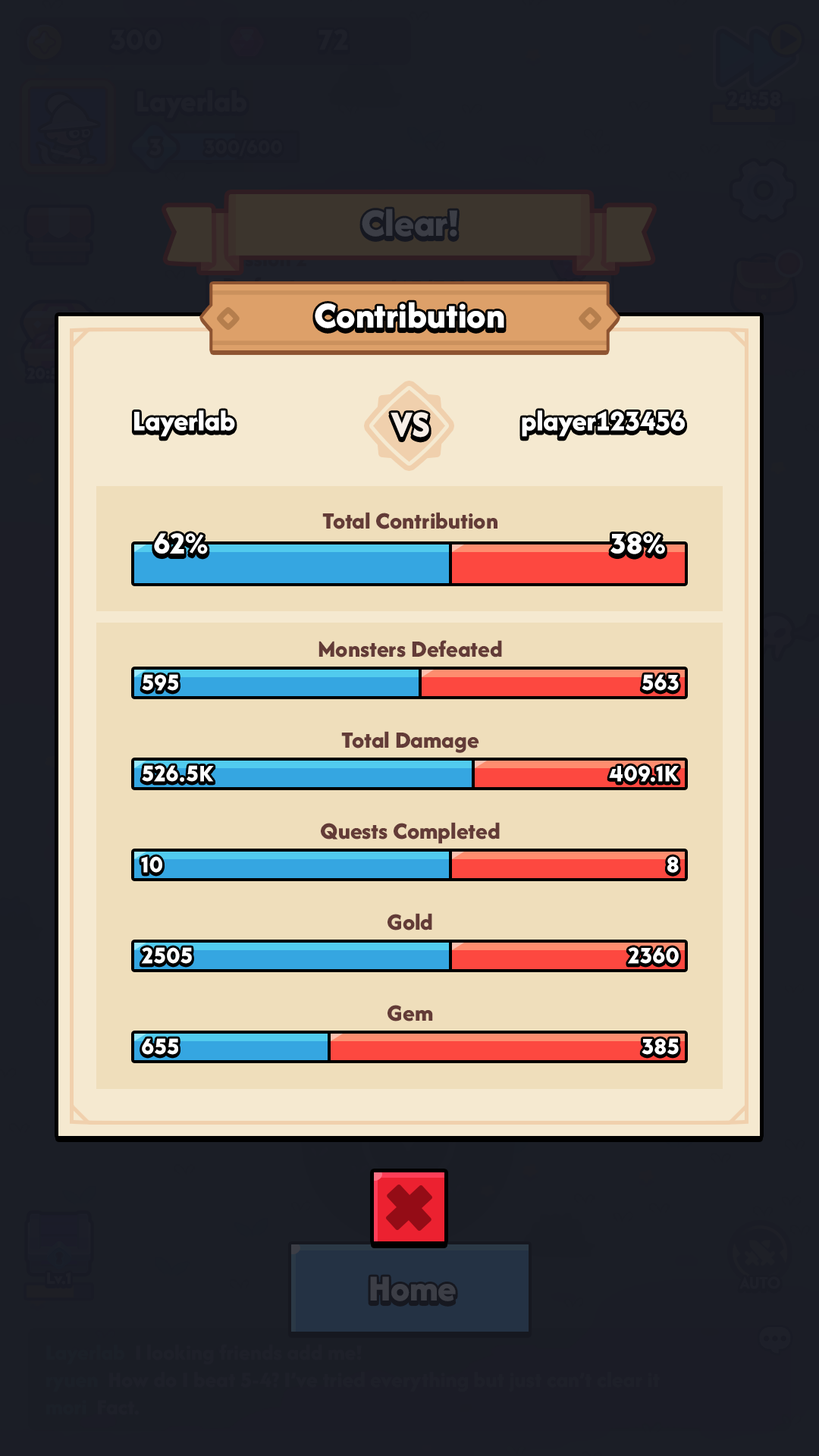
<style>
.page{position:relative;width:819px;height:1456px;background:#1b1e26}
.page>*{position:absolute;margin:0}
.t1{font:37.9px "AfacadFlux-ExtraBold";color:#ffffff}
.t2{font:29.6px "AfacadFlux-ExtraBold";color:#ffffff}
.t3{font:37.9px "AfacadFlux-ExtraBold";color:#f7eee7}
.t4{font:24.3px "AfacadFlux-ExtraBold";color:#633b37}
.t5{font:29.6px "LTAvocado-Bold";color:#ffffff;text-transform:uppercase}
.t6{font:22.7px "LTAvocado-Bold";color:#ffffff;text-transform:uppercase}
</style>
<div class="page">
<p class="t1" style="left:315px;top:302px;width:189px;height:26px">Contribution</p>
<p class="t2" style="left:134px;top:410px;width:101px;height:27px">Layerlab</p>
<p class="t3" style="left:391px;top:412px;width:38px;height:26px">VS</p>
<p class="t2" style="left:522px;top:410px;width:163px;height:27px">player123456</p>
<p class="t4" style="left:322px;top:512px;width:175px;height:17px">Total Contribution</p>
<p class="t5" style="left:154px;top:533px;width:54px;height:21px">62%</p>
<p class="t5" style="left:610px;top:533px;width:55px;height:21px">38%</p>
<p class="t4" style="left:318px;top:640px;width:184px;height:17px">Monsters Defeated</p>
<p class="t6" style="left:142px;top:674px;width:36px;height:17px">595</p>
<p class="t6" style="left:642px;top:674px;width:37px;height:17px">563</p>
<p class="t4" style="left:341px;top:731px;width:138px;height:22px">Total Damage</p>
<p class="t6" style="left:142px;top:765px;width:72px;height:17px">526.5K</p>
<p class="t6" style="left:609px;top:765px;width:70px;height:17px">409.1K</p>
<p class="t4" style="left:321px;top:822px;width:179px;height:22px">Quests Completed</p>
<p class="t6" style="left:141px;top:856px;width:21px;height:17px">10</p>
<p class="t6" style="left:667px;top:856px;width:12px;height:17px">8</p>
<p class="t4" style="left:388px;top:913px;width:44px;height:17px">Gold</p>
<p class="t6" style="left:141px;top:947px;width:51px;height:17px">2505</p>
<p class="t6" style="left:628px;top:947px;width:51px;height:17px">2360</p>
<p class="t4" style="left:388px;top:1005px;width:45px;height:16px">Gem</p>
<p class="t6" style="left:142px;top:1038px;width:36px;height:17px">655</p>
<p class="t6" style="left:642px;top:1038px;width:37px;height:17px">385</p>
</div>
